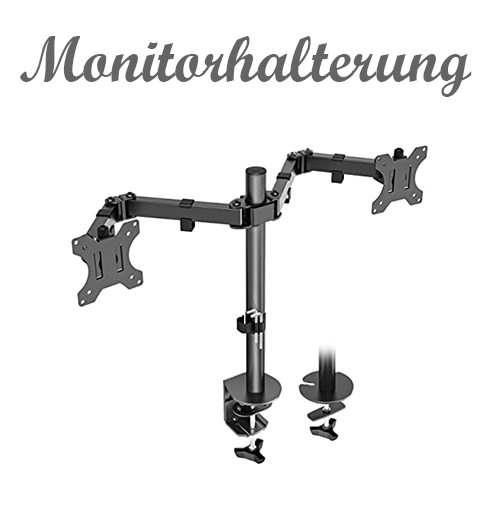
<style>
.page{position:relative;width:499px;height:526px;background:#ffffff}
.page>*{position:absolute;margin:0}
.t1{font:64px "ScriptMTBold";color:#656464}
</style>
<div class="page">
<p class="t1" style="left:20px;top:36px;width:452px;height:61px">Monitorhalterung</p>
</div>
